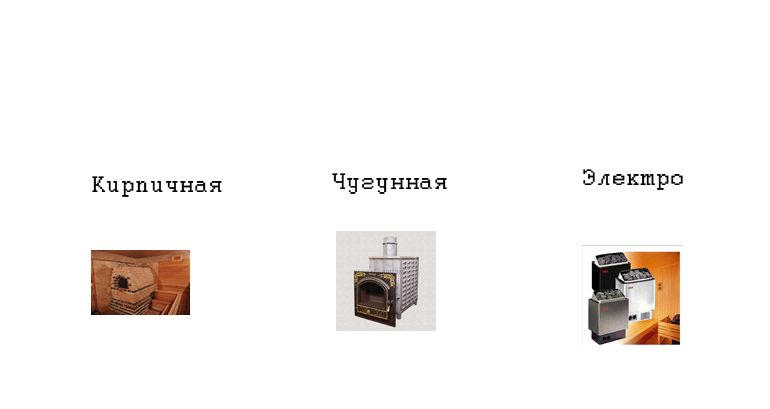
<style>
.page{position:relative;width:770px;height:409px;background:#ffffff}
.page>*{position:absolute;margin:0}
.t1{font:25px "Courier";letter-spacing:0.025em;color:#000000}
</style>
<div class="page">
<p class="t1" style="left:332px;top:173px;width:115px;height:21px">Чугунная</p>
<p class="t1" style="left:583px;top:169px;width:100px;height:21px">Электро</p>
<p class="t1" style="left:92px;top:176px;width:130px;height:21px">Кирпичная</p>
</div>
